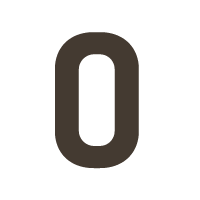
<style>
.page{position:relative;width:200px;height:200px;background:#ffffff}
.page>*{position:absolute;margin:0}
.t1{font:209px "ConduitITC-Bold";color:#443a31;text-transform:uppercase}
</style>
<div class="page">
<p class="t1" style="left:55px;top:32px;width:84px;height:137px">0</p>
</div>
